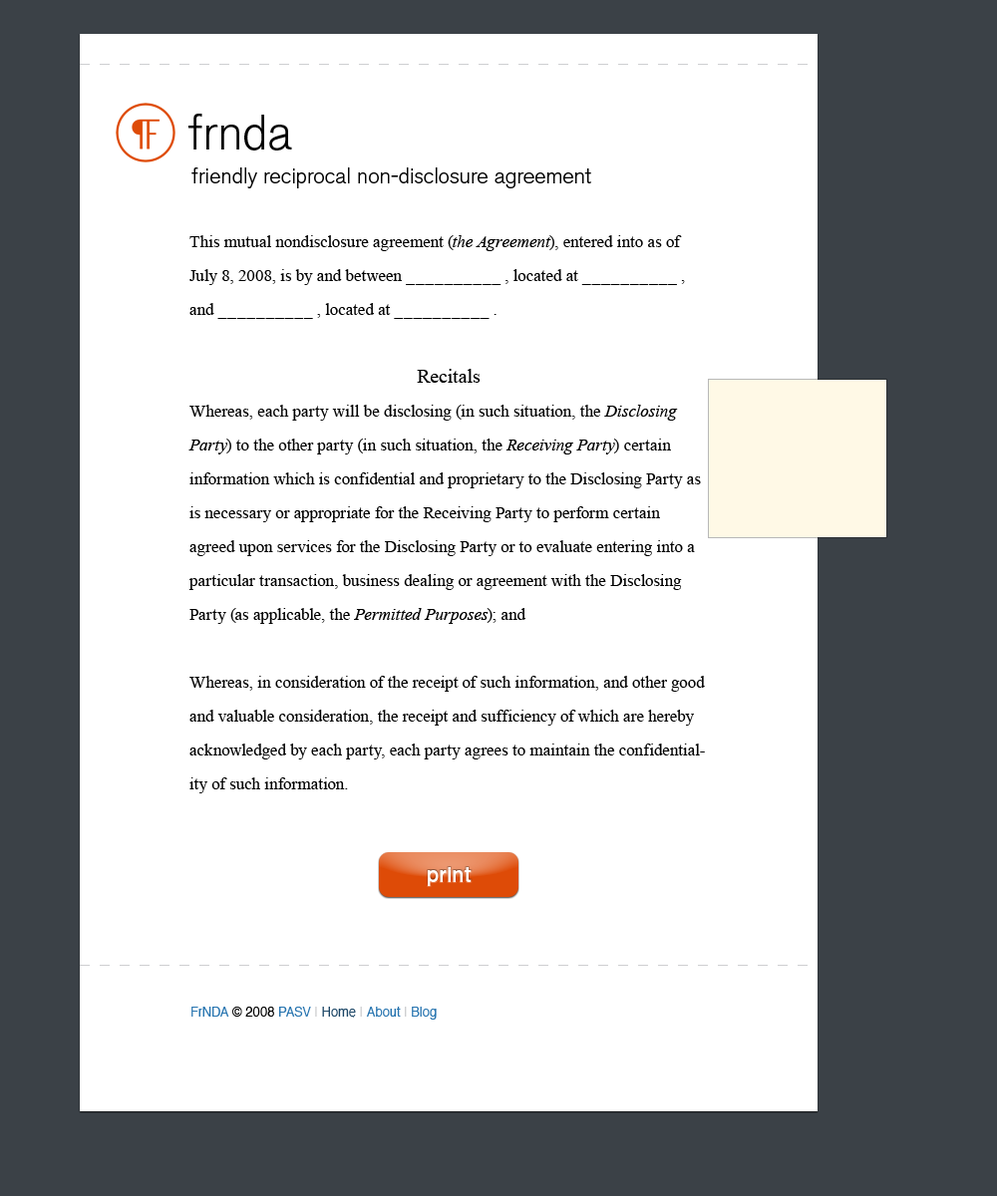
<style>
.page{position:relative;width:997px;height:1196px;background:#ffffff}
.page>*{position:absolute;margin:0}
.t1{font:49.8px "AkzidenzGroteskBE-Light";color:#000000}
.t2{font:21.9px "AkzidenzGroteskBE-Light";color:#000000}
.t3{font:16.9px/33.9px "TimesNewRomanPSMT";color:#000000}
.t4{font:16.9px/33.9px "TimesNewRomanPS-ItalicMT";color:#000000}
.t5{font:19.9px/33.9px "TimesNewRomanPSMT";color:#000000}
.t6{font:21.9px "AkzidenzGroteskBE-Md";color:#ffffff}
.t7{font:13px "Helvetica";color:#000000}
.t8{font:13px "Helvetica";color:#2875b0}
.t9{font:13px "Helvetica";color:#cecfd1}
.t10{font:13px "Helvetica";color:#1d4767}
</style>
<div class="page">
<p class="t1" style="left:188px;top:114px;width:104px;height:37px">frnda</p>
<p class="t2" style="left:191px;top:167px;width:400px;height:21px">friendly reciprocal non-disclosure agreement</p>
<p class="t3" style="left:188px;top:235px;width:517px;height:558px">This mutual nondisclosure agreement (<span class="t4">the Agreement</span>), entered into as of July 8, 2008, is by and between __________ , located at __________ , and __________ , located at __________ .<br><br><span class="t5">Recitals<br></span>Whereas, each party will be disclosing (in such situation, the <span class="t4">Disclosing Party</span>) to the other party (in such situation, the <span class="t4">Receiving Party</span>) certain information which is confidential and proprietary to the Disclosing Party as is necessary or appropriate for the Receiving Party to perform certain agreed upon services for the Disclosing Party or to evaluate entering into a particular transaction, business dealing or agreement with the Disclosing Party (as applicable, the <span class="t4">Permitted Purposes</span>); and<br><br>Whereas, in consideration of the receipt of such information, and other good and valuable consideration, the receipt and sufficiency of which are hereby acknowledged by each party, each party agrees to maintain the confidentiality of such information.</p>
<p class="t6" style="left:428px;top:867px;width:44px;height:19px">print</p>
<p class="t7" style="left:191px;top:1007px;width:246px;height:13px"><span class="t8">FrNDA </span>© 2008 <span class="t8">PASV </span><span class="t9">| </span><span class="t10">Home </span><span class="t9">| </span><span class="t8">About </span><span class="t9">| </span><span class="t8">Blog</span></p>
</div>
